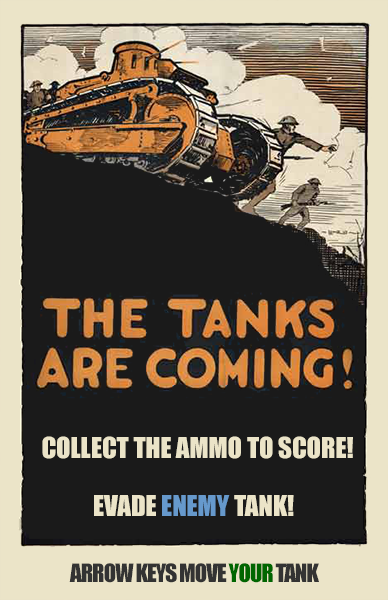
<style>
.page{position:relative;width:388px;height:600px;background:#1a1a1a}
.page>*{position:absolute;margin:0}
.t1{font:26.6px "Impact";color:#ebe4c8}
.t2{font:26.6px "Impact";color:#6699cc}
.t3{font:23.2px "Impact";letter-spacing:-0.05em;color:#333333}
.t4{font:23.2px "Impact";letter-spacing:-0.05em;color:#006600}
</style>
<div class="page">
<p class="t1" style="left:42px;top:436px;width:311px;height:23px">COLLECT THE AMMO TO SCORE!</p>
<p class="t1" style="left:94px;top:495px;width:200px;height:21px">EVADE <span class="t2">ENEMY</span> TANK!</p>
<p class="t3" style="left:69px;top:563px;width:250px;height:20px">ARROW KEYS MOVE <span class="t4">YOUR </span>TANK</p>
</div>
